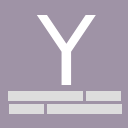
<style>
.page{position:relative;width:128px;height:128px;background:#9f93a6}
.page>*{position:absolute;margin:0}
.t1{font:96px "DejaVuSans";color:#ffffff}
</style>
<div class="page">
<p class="t1" style="left:36px;top:15px;width:60px;height:70px">Y</p>
</div>
